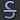
<style>
.page{position:relative;width:20px;height:20px;background:#333333}
.page>*{position:absolute;margin:0}
.t1{font:23px "LucidaGrande";letter-spacing:-0.025em}
</style>
<div class="page">
<p class="t1" style="left:5px;top:1px;width:10px;height:18px">S</p>
</div>
